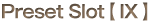
<style>
.page{position:relative;width:150px;height:23px;background:#ffffff}
.page>*{position:absolute;margin:0}
.t1{font:18px "GothicMB101Pro-DeBold";letter-spacing:-0.04em}
</style>
<div class="page">
<p class="t1" style="left:2px;top:2px;width:146px;height:19px">Preset Slot【     】</p>
<p class="t1" style="left:120px;top:4px;width:18px;height:15px">IX</p>
</div>
